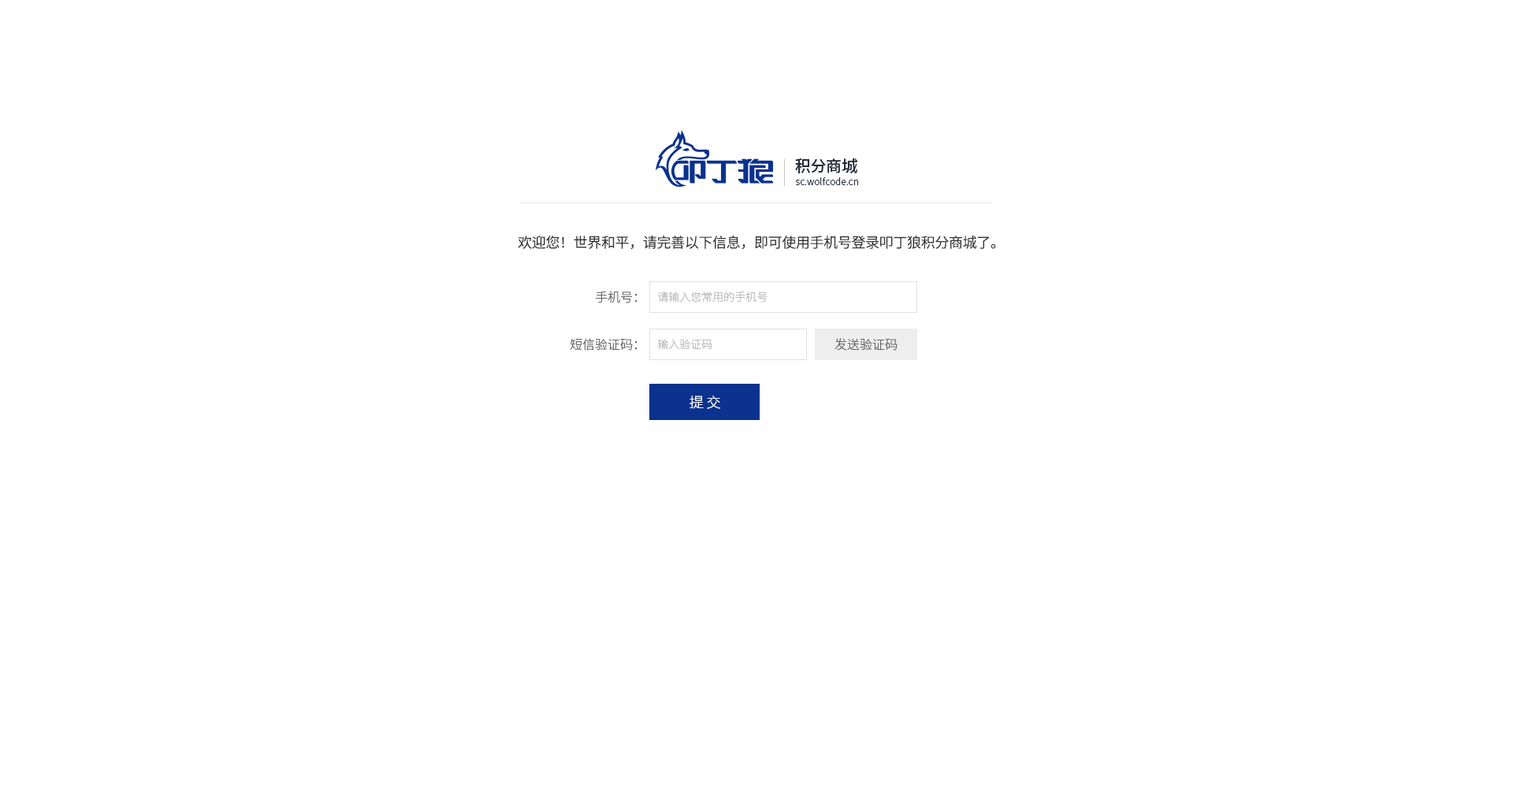
<style>
.page{position:relative;width:1513px;height:788px;background:#ffffff}
.page>*{position:absolute;margin:0}
.t1{font:15.8px "SourceHanSansSC-Medium";color:#242b39;text-transform:uppercase}
.t2{font:9.5px "SourceHanSansSC-Light";color:#242b39}
.t3{font:14.2px "SourceHanSansSC-Normal";letter-spacing:-0.02em;color:#333333}
.t4{font:12.6px "SourceHanSansSC-Light";color:#666666}
.t5{font:11px "SourceHanSansSC-Light";color:#bcbcbc}
.t6{font:14.2px "SourceHanSansSC-Light";color:#ffffff}
</style>
<div class="page">
<p class="t1" style="left:795px;top:158px;width:62px;height:16px">积分商城</p>
<p class="t2" style="left:795px;top:177px;width:63px;height:8px">sc.wolfcode.cn</p>
<p class="t3" style="left:518px;top:236px;width:478px;height:14px">欢迎您！世界和平，请完善以下信息，即可使用手机号登录叩丁狼积分商城了。</p>
<p class="t4" style="left:596px;top:291px;width:42px;height:12px">手机号：</p>
<p class="t5" style="left:657px;top:292px;width:111px;height:11px">请输入您常用的手机号</p>
<p class="t4" style="left:570px;top:338px;width:68px;height:13px">短信验证码：</p>
<p class="t5" style="left:657px;top:339px;width:55px;height:11px">输入验证码</p>
<p class="t4" style="left:835px;top:338px;width:63px;height:13px">发送验证码</p>
<p class="t6" style="left:690px;top:396px;width:30px;height:13px">提 交</p>
</div>
